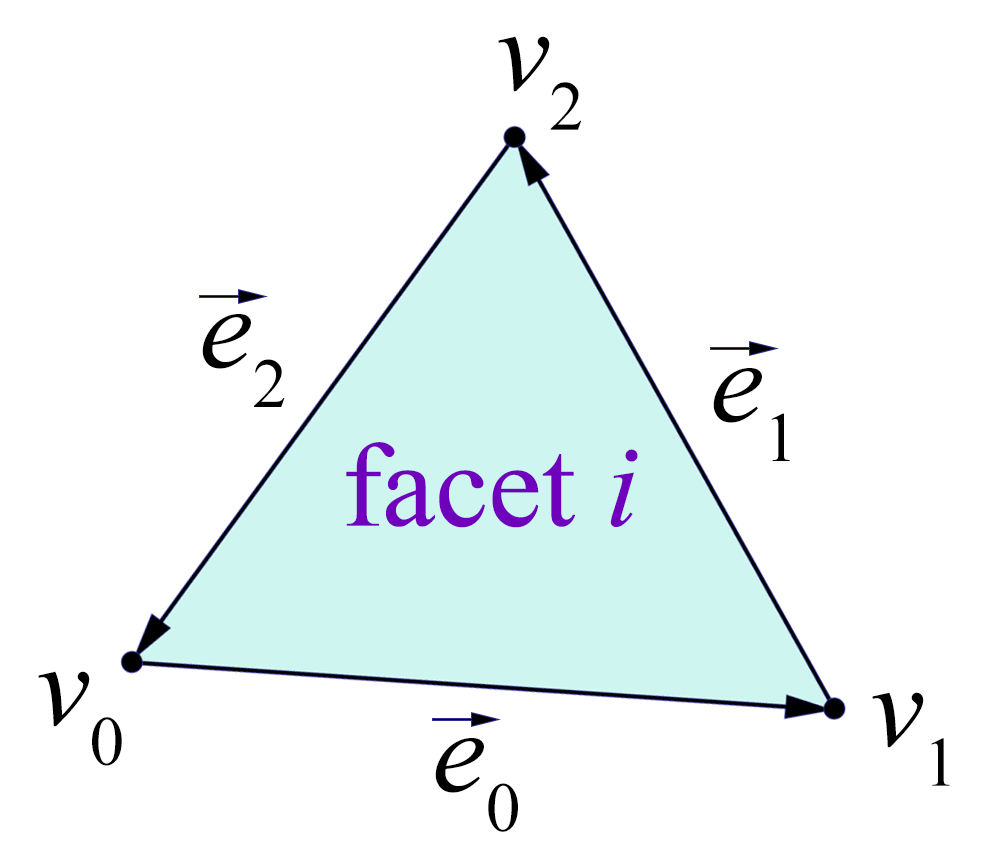
<style>
.page{position:relative;width:1002px;height:866px;background:#ffffff}
.page>*{position:absolute;margin:0}
.t1{font:120px "TimesNewRomanPS-ItalicMT";color:#000000}
.t2{font:120px "TimesNewRomanPSMT";color:#000000}
.t3{font:120px "TimesNewRomanPSMT";color:#6f00bc}
.t4{font:120px "TimesNewRomanPS-ItalicMT";color:#6f00bc}
</style>
<div class="page">
<p class="t1" style="left:498px;top:36px;width:84px;height:94px">v<span class="t2">2</span></p>
<p class="t1" style="left:202px;top:314px;width:83px;height:93px">e<span class="t2">2</span></p>
<p class="t1" style="left:713px;top:368px;width:77px;height:93px">e<span class="t2">1</span></p>
<p class="t3" style="left:346px;top:442px;width:292px;height:86px">facet <span class="t4">i</span></p>
<p class="t1" style="left:38px;top:671px;width:84px;height:95px">v<span class="t2">0</span></p>
<p class="t1" style="left:872px;top:692px;width:78px;height:94px">v<span class="t2">1</span></p>
<p class="t1" style="left:435px;top:738px;width:83px;height:94px">e<span class="t2">0</span></p>
</div>
